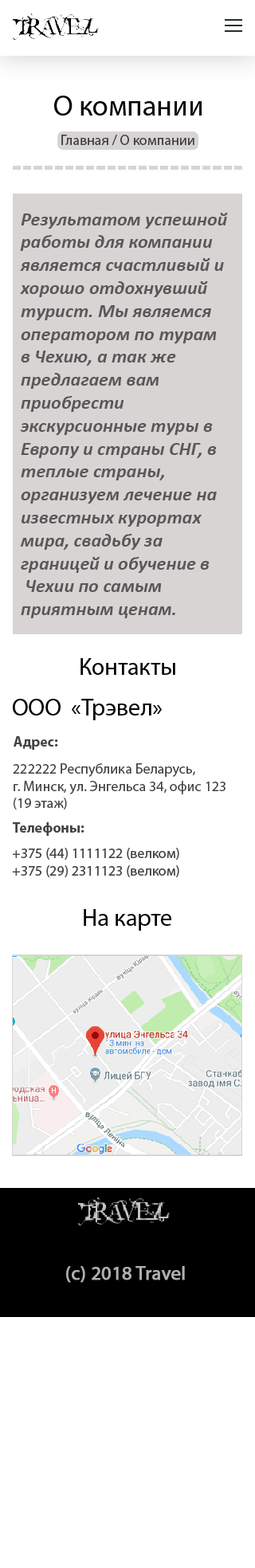
<style>
.page{position:relative;width:255px;height:1568px;background:#ffffff}
.page>*{position:absolute;margin:0}
.t1{font:19.1px "Calibri-BoldItalic";color:#585858}
.t2{font:14.3px "MyriadPro-Regular";color:#434343}
</style>
<div class="page">
<p class="t1" style="left:20px;top:213px;width:208px;height:405px">Результатом успешной <br>работы для компании <br>является счастливый и <br>хорошо отдохнувший <br>турист. Мы являемся <br>оператором по турам <br>в Чехию, а так же <br>предлагаем вам <br>приобрести <br>экскурсионные туры в <br>Европу и страны СНГ, в <br>теплые страны, <br>организуем лечение на <br>известных курортах <br>мира, свадьбу за <br>границей и обучение в<br> Чехии по самым <br>приятным ценам.</p>
<p class="t2" style="left:13px;top:763px;width:212px;height:46px">222222 Республика Беларусь, <br>г. Минск, ул. Энгельса 34, офис 123 <br>(19 этаж)</p>
</div>
